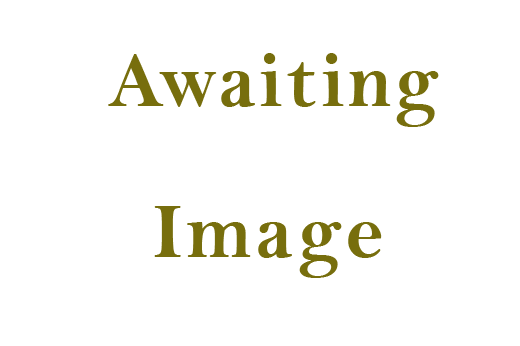
<style>
.page{position:relative;width:520px;height:346px;background:#ffffff}
.page>*{position:absolute;margin:0}
.t1{font:80px/150.5px "BellMTBold";letter-spacing:0.04em;color:#776e0d}
</style>
<div class="page">
<p class="t1" style="left:108px;top:53px;width:331px;height:225px">Awaiting<br>  Image</p>
</div>
